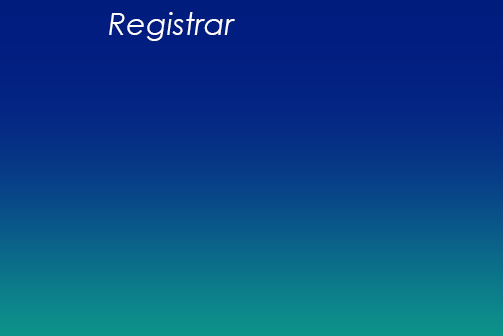
<style>
.page{position:relative;width:503px;height:336px}
.page>*{position:absolute;margin:0}
.t1{font:30.5px "CenturyGothic-Italic";color:#fefefe}
</style>
<div class="page">
<p class="t1" style="left:109px;top:12px;width:126px;height:29px">Registrar Medicamento</p>
</div>
